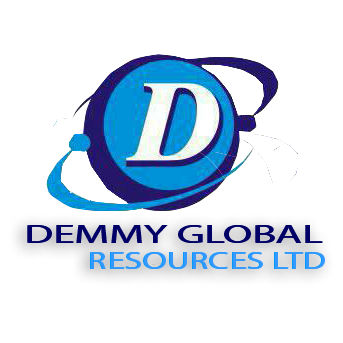
<style>
.page{position:relative;width:343px;height:343px;background:#ffffff}
.page>*{position:absolute;margin:0}
.t1{font:25.8px "MyriadPro-Regular";color:#000066;scale:1.67 1}
.t2{font:24.3px "MyriadPro-Regular";color:#3399ff;scale:1.46 1}
</style>
<div class="page">
<p class="t1" style="left:27px;top:225px;width:295px;height:18px">DEMMY GLOBAL</p>
<p class="t1" style="left:28px;top:225px;width:295px;height:18px">DEMMY GLOBAL</p>
<p class="t2" style="left:90px;top:252px;width:234px;height:17px">RESOURCES LTD</p>
<p class="t2" style="left:91px;top:252px;width:234px;height:17px">RESOURCES LTD</p>
</div>
